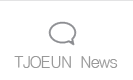
<style>
.page{position:relative;width:133px;height:80px;background:#ffffff}
.page>*{position:absolute;margin:0}
.t1{font:16px "Haansoft-Dotum";letter-spacing:-0.05em;color:#999999}
</style>
<div class="page">
<p class="t1" style="left:14px;top:56px;width:104px;height:12px">TJOEUN  News</p>
</div>
